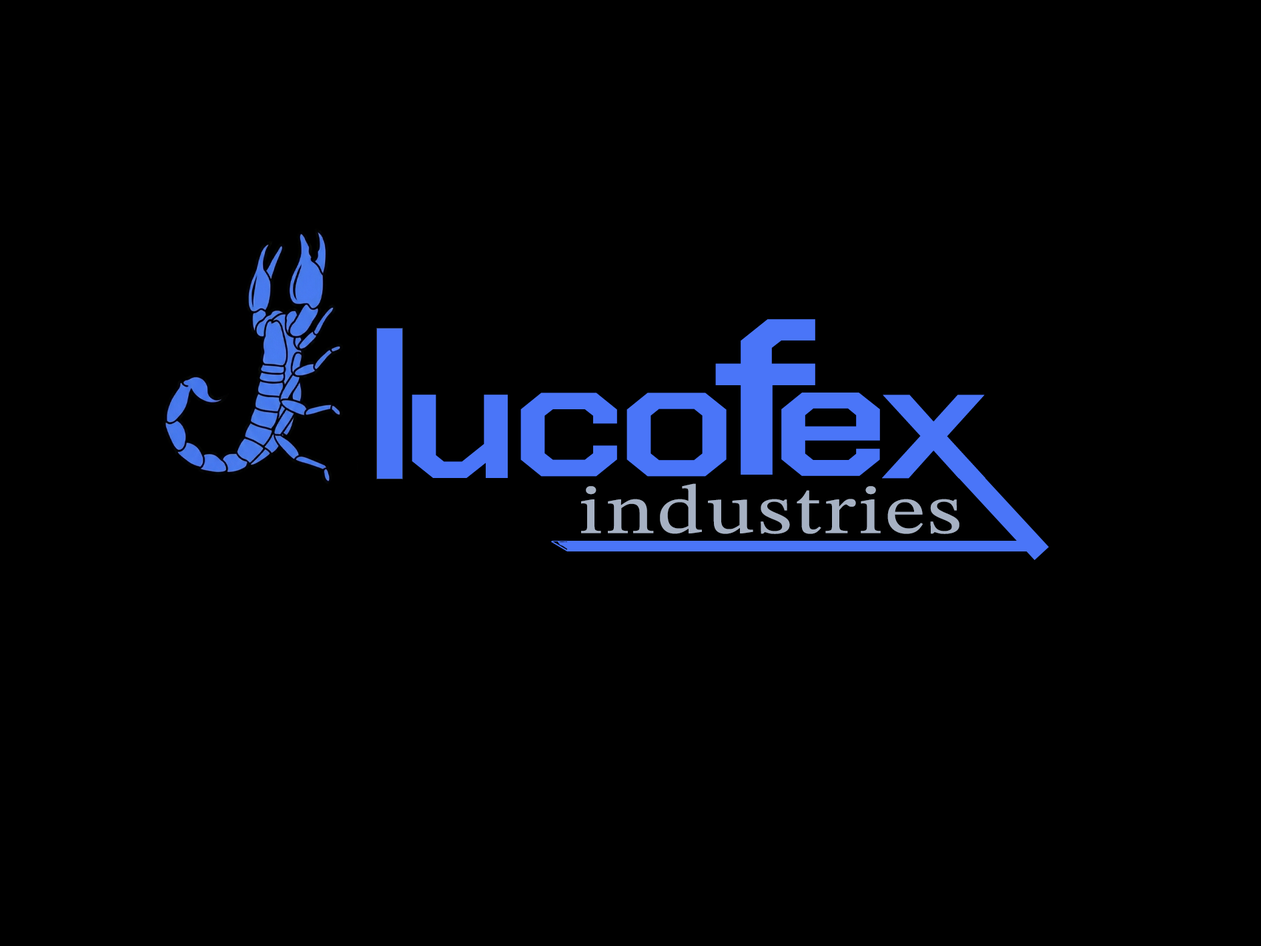
<style>
.page{position:relative;width:1261px;height:946px;background:#000000}
.page>*{position:absolute;margin:0}
.t1{font:222.4px "ChakraPetch-SemiBold";letter-spacing:0.023em;color:#4a75f8;scale:1.25 1}
.t2{font:166.8px "ChakraPetch-SemiBold";letter-spacing:0.023em;color:#4a75f8;scale:1.25 1}
.t3{font:69.5px "STIXTwoText";letter-spacing:0.023em;color:#a6b1c3;scale:1.25 1}
</style>
<div class="page">
<p class="t1" style="left:715px;top:319px;width:100px;height:155px">f</p>
<p class="t2" style="left:412px;top:394px;width:96px;height:84px">u</p>
<p class="t2" style="left:520px;top:392px;width:97px;height:84px">c</p>
<p class="t2" style="left:627px;top:392px;width:100px;height:84px">o</p>
<p class="t2" style="left:781px;top:392px;width:99px;height:84px">e</p>
<p class="t2" style="left:882px;top:394px;width:104px;height:84px">x</p>
<p class="t3" style="left:581px;top:483px;width:379px;height:51px">industries</p>
</div>
